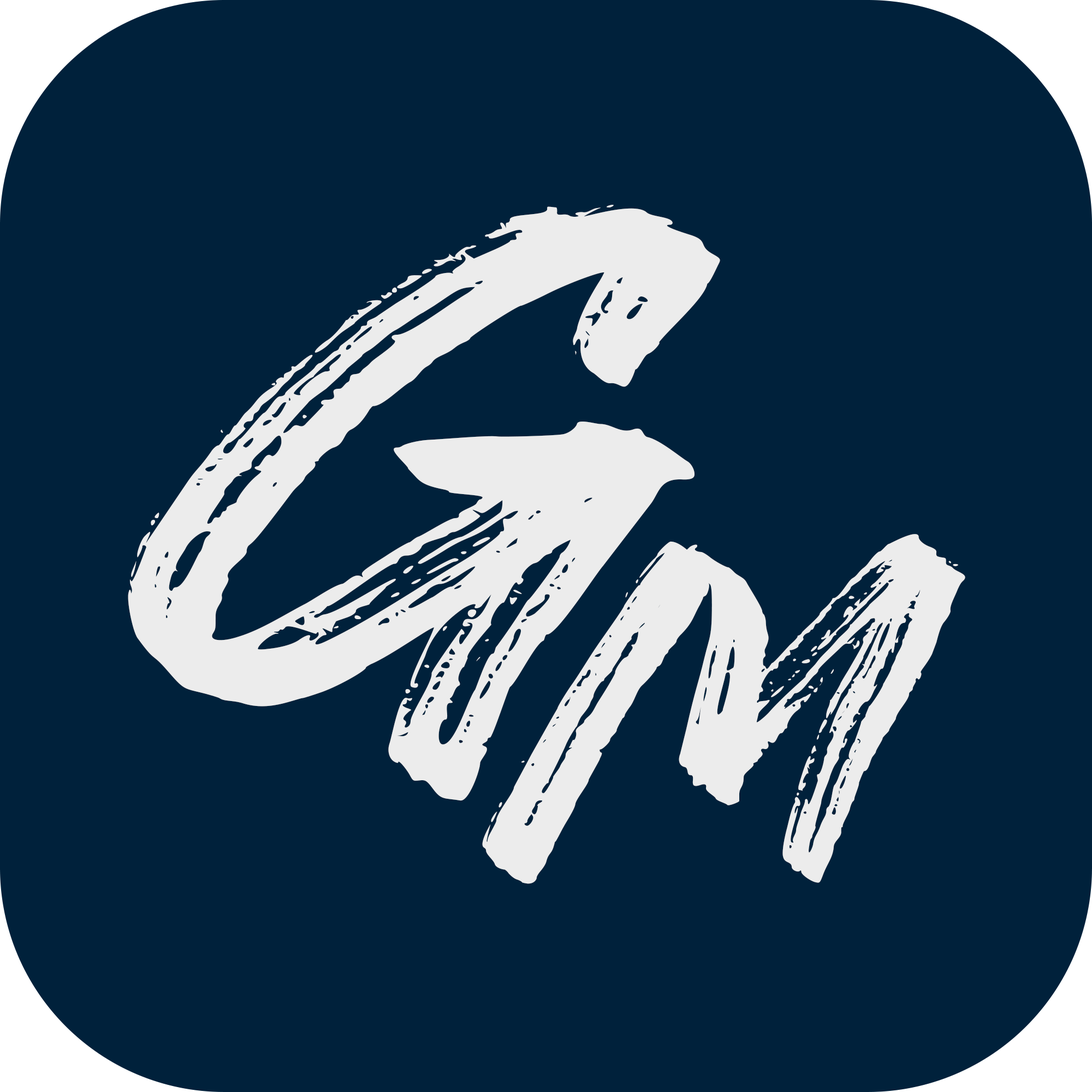
<style>
.page{position:relative;width:1092px;height:1092px;background:#00213b}
.page>*{position:absolute;margin:0}
.t1{font:692px "RawkBrush";letter-spacing:0.06em;color:#ececec;font-variant:small-caps;scale:1.79 1}
.t2{font:451.7px "RawkBrush";letter-spacing:0.06em;color:#ececec;font-variant:small-caps;scale:1.63 1}
</style>
<div class="page">
<p class="t1" style="left:128px;top:205px;width:592px;height:596px">G</p>
<p class="t2" style="left:482px;top:534px;width:483px;height:350px">M</p>
</div>
